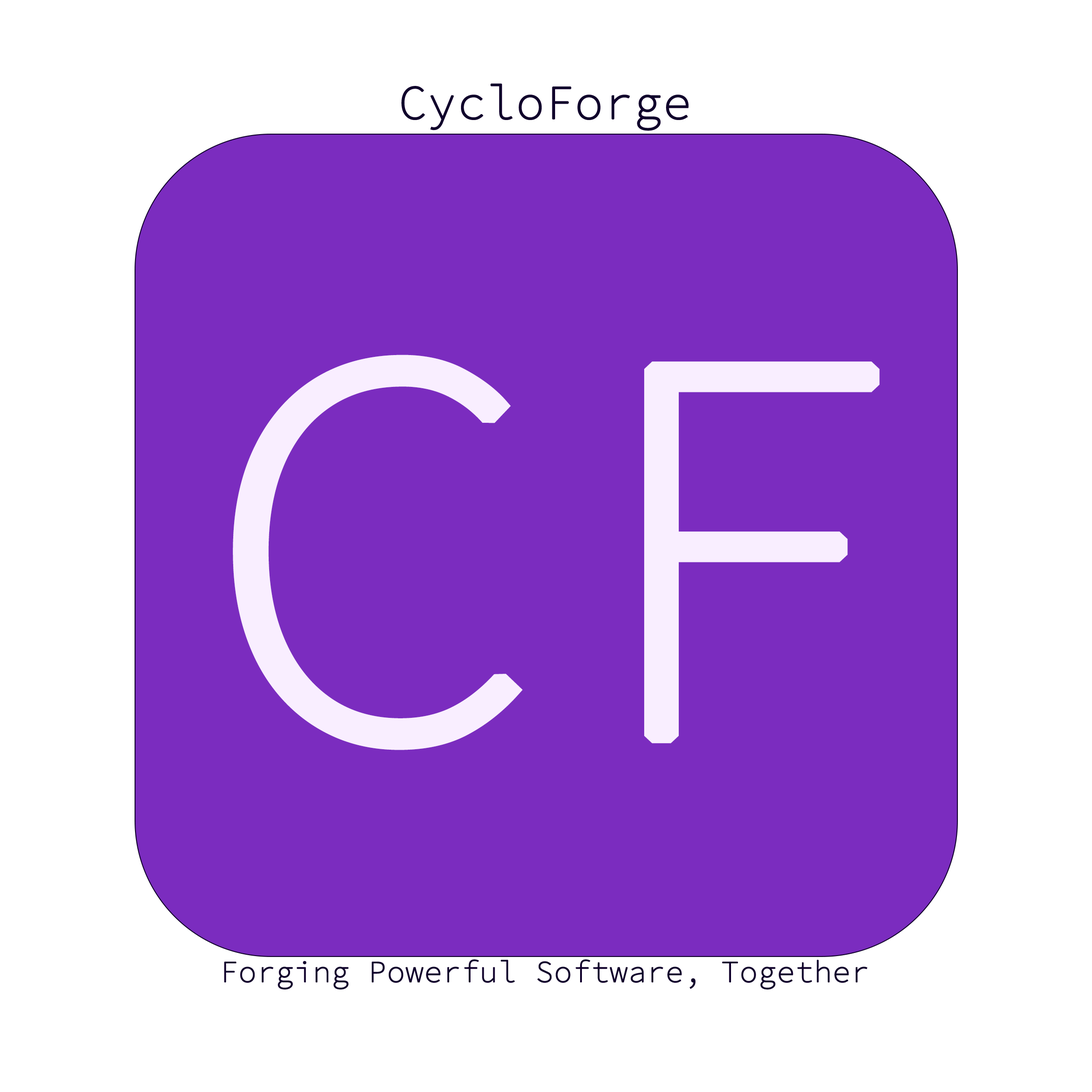
<style>
.page{position:relative;width:1092px;height:1092px;background:#7b2cbf}
.page>*{position:absolute;margin:0}
.t1{font:47.8px "SourceCodeRoman-ExtraLight";color:#10002b;font-weight:bold}
.t2{font:555.6px "SourceCodeRoman-ExtraLight";color:#f9eeff;font-weight:bold;scale:1.04 1}
.t3{font:30.1px "SourceCodeRoman-ExtraLight";color:#10002b;font-weight:bold}
</style>
<div class="page">
<p class="t1" style="left:401px;top:83px;width:288px;height:48px">CycloForge</p>
<p class="t2" style="left:233px;top:355px;width:647px;height:395px">CF</p>
<p class="t3" style="left:224px;top:959px;width:643px;height:31px">Forging Powerful Software, Together</p>
</div>
